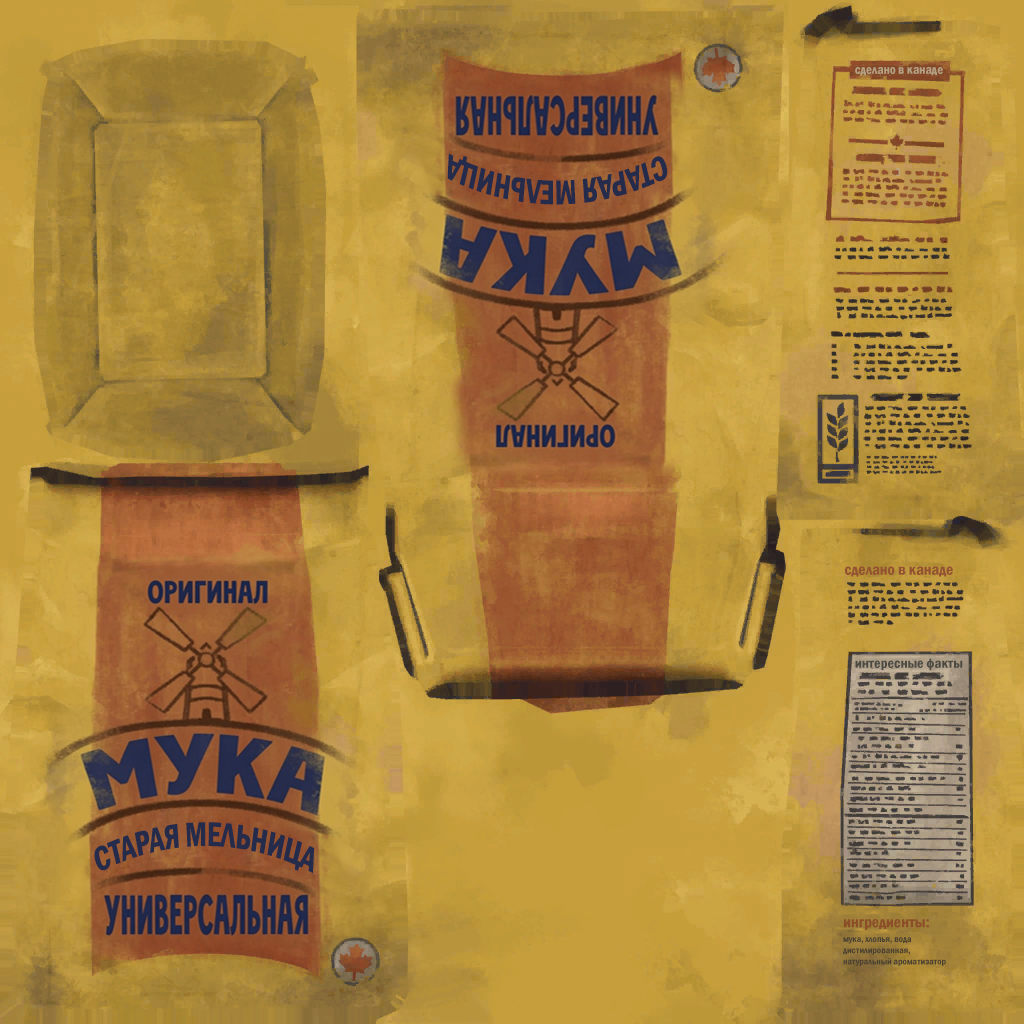
<style>
.page{position:relative;width:1024px;height:1024px}
.page>*{position:absolute;margin:0}
.t1{font:13px "FranklinGothic-DemiCond";color:#b5a284}
.t2{font:35.5px "FranklinGothic-DemiCond";color:#252b4a;scale:0.76 1}
.t3{font:16px "FranklinGothic-DemiCond";color:#945131}
.t4{font:14.3px "FranklinGothic-DemiCond";color:#4a4942}
.t5{font:16px "FranklinGothic-DemiCond";color:#8c4d29}
.t6{font:9.4px "FranklinGothic-DemiCond";color:#4a4131}
</style>
<div class="page">
<p class="t1" style="left:855px;top:67px;width:88px;height:9px">сделано в канаде</p>
<p class="t2" style="left:447px;top:153px;width:221px;height:52px;rotate:180deg">СТАРАЯ МЕЛЬНИЦА</p>
<p class="t3" style="left:845px;top:566px;width:108px;height:11px">сделано в канаде</p>
<p class="t4" style="left:855px;top:658px;width:108px;height:13px">интересные факты</p>
<p class="t2" style="left:94px;top:822px;width:220px;height:51px">СТАРАЯ МЕЛЬНИЦА</p>
<p class="t5" style="left:844px;top:919px;width:85px;height:11px">ингредиенты:</p>
<p class="t6" style="left:843px;top:937px;width:103px;height:29px">мука, хлопья, вода <br>дистилированная, <br>натуральный ароматизатор</p>
</div>
